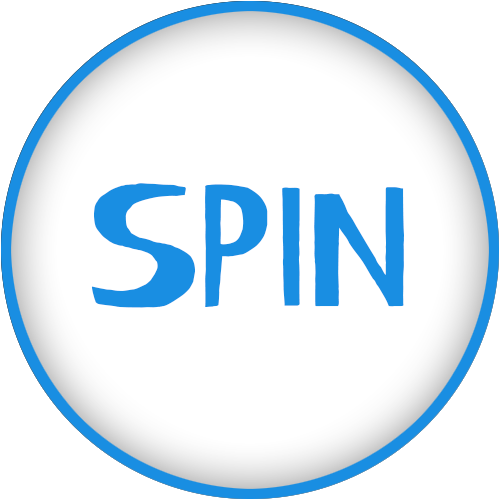
<style>
.page{position:relative;width:500px;height:500px;background:#ffffff}
.page>*{position:absolute;margin:0}
.t1{font:200px "BMKIRANGHAERANG";color:#198ee2}
</style>
<div class="page">
<p class="t1" style="left:91px;top:183px;width:313px;height:125px">SPIN</p>
</div>
